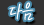
<style>
.page{position:relative;width:44px;height:25px;background:#333333}
.page>*{position:absolute;margin:0}
.t1{font:24px "KCC-eunyoung-Regular";color:#ffffff}
</style>
<div class="page">
<p class="t1" style="left:9px;top:2px;width:25px;height:19px">다음</p>
</div>
